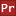
<style>
.page{position:relative;width:16px;height:16px;background:#ac2626}
.page>*{position:absolute;margin:0}
.t1{font:12px "LucidaConsole";color:#ffffff}
</style>
<div class="page">
<p class="t1" style="left:1px;top:4px;width:14px;height:8px">Pr</p>
</div>
